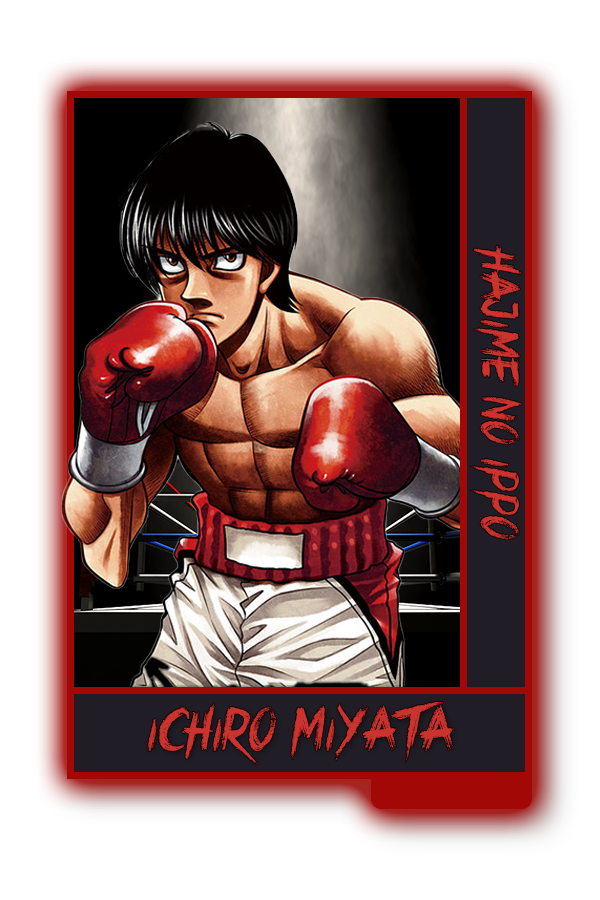
<style>
.page{position:relative;width:600px;height:900px;background:#ffffff}
.page>*{position:absolute;margin:0}
.t1{font:54.2px "CrimesTimesSix";color:#cb332f}
.t2{font:62.5px "CrimesTimesSix";color:#cb332f}
</style>
<div class="page">
<p class="t1" style="left:470px;top:245px;width:52px;height:295px;rotate:90deg">Hajime No Ippo</p>
<p class="t2" style="left:148px;top:702px;width:306px;height:62px">Ichiro Miyata</p>
</div>
